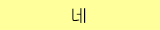
<style>
.page{position:relative;width:160px;height:30px;background:#ffff9c}
.page>*{position:absolute;margin:0}
.t1{font:18px "Gulim";color:#000000}
</style>
<div class="page">
<p class="t1" style="left:72px;top:8px;width:14px;height:15px">네</p>
</div>
